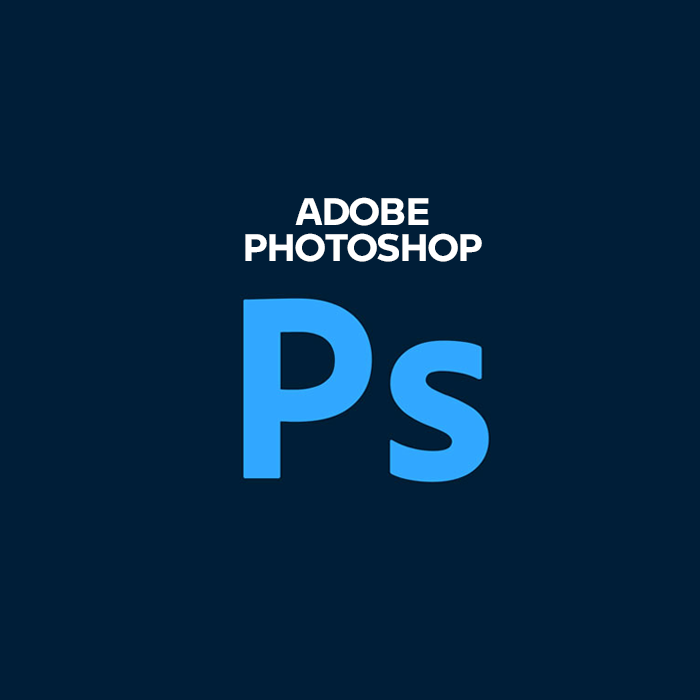
<style>
.page{position:relative;width:700px;height:700px;background:#001e38}
.page>*{position:absolute;margin:0}
.t1{font:37.4px/36.3px "BMWMotorradW05-Bold";color:#ffffff}
</style>
<div class="page">
<p class="t1" style="left:245px;top:197px;width:237px;height:65px;text-align:center">ADOBE<br>PHOTOSHOP</p>
</div>
